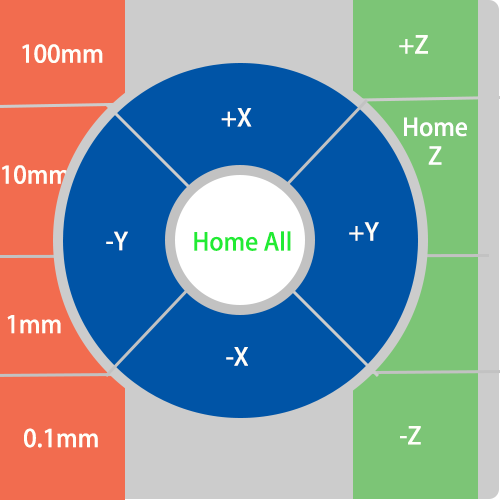
<style>
.page{position:relative;width:500px;height:500px;background:#0054a6}
.page>*{position:absolute;margin:0}
.t1{font:24px "AdobeHeitiStd-Regular";color:#fffff9}
.t2{font:24px "AdobeHeitiStd-Regular";color:#ffffff}
.t3{font:24px "AdobeHeitiStd-Regular";color:#21eb34}
</style>
<div class="page">
<p class="t1" style="left:399px;top:35px;width:29px;height:19px">+Z</p>
<p class="t1" style="left:22px;top:44px;width:81px;height:19px">100mm</p>
<p class="t1" style="left:221px;top:108px;width:31px;height:19px">+X</p>
<p class="t2" style="left:404px;top:117px;width:63px;height:48px;text-align:center">Home<br>Z</p>
<p class="t1" style="left:2px;top:165px;width:67px;height:19px">10mm</p>
<p class="t1" style="left:349px;top:222px;width:30px;height:19px">+Y</p>
<p class="t1" style="left:106px;top:231px;width:22px;height:20px">-Y</p>
<p class="t3" style="left:194px;top:231px;width:97px;height:20px">Home All</p>
<p class="t1" style="left:7px;top:315px;width:54px;height:19px">1mm</p>
<p class="t1" style="left:226px;top:347px;width:22px;height:19px">-X</p>
<p class="t1" style="left:24px;top:428px;width:74px;height:20px">0.1mm</p>
<p class="t1" style="left:400px;top:426px;width:21px;height:19px">-Z</p>
</div>
